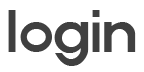
<style>
.page{position:relative;width:144px;height:72px;background:#ffffff}
.page>*{position:absolute;margin:0}
.t1{font:54.4px "ExpoM-HM";color:#404040;scale:0.96 1}
</style>
<div class="page">
<p class="t1" style="left:8px;top:10px;width:128px;height:56px">login</p>
</div>
